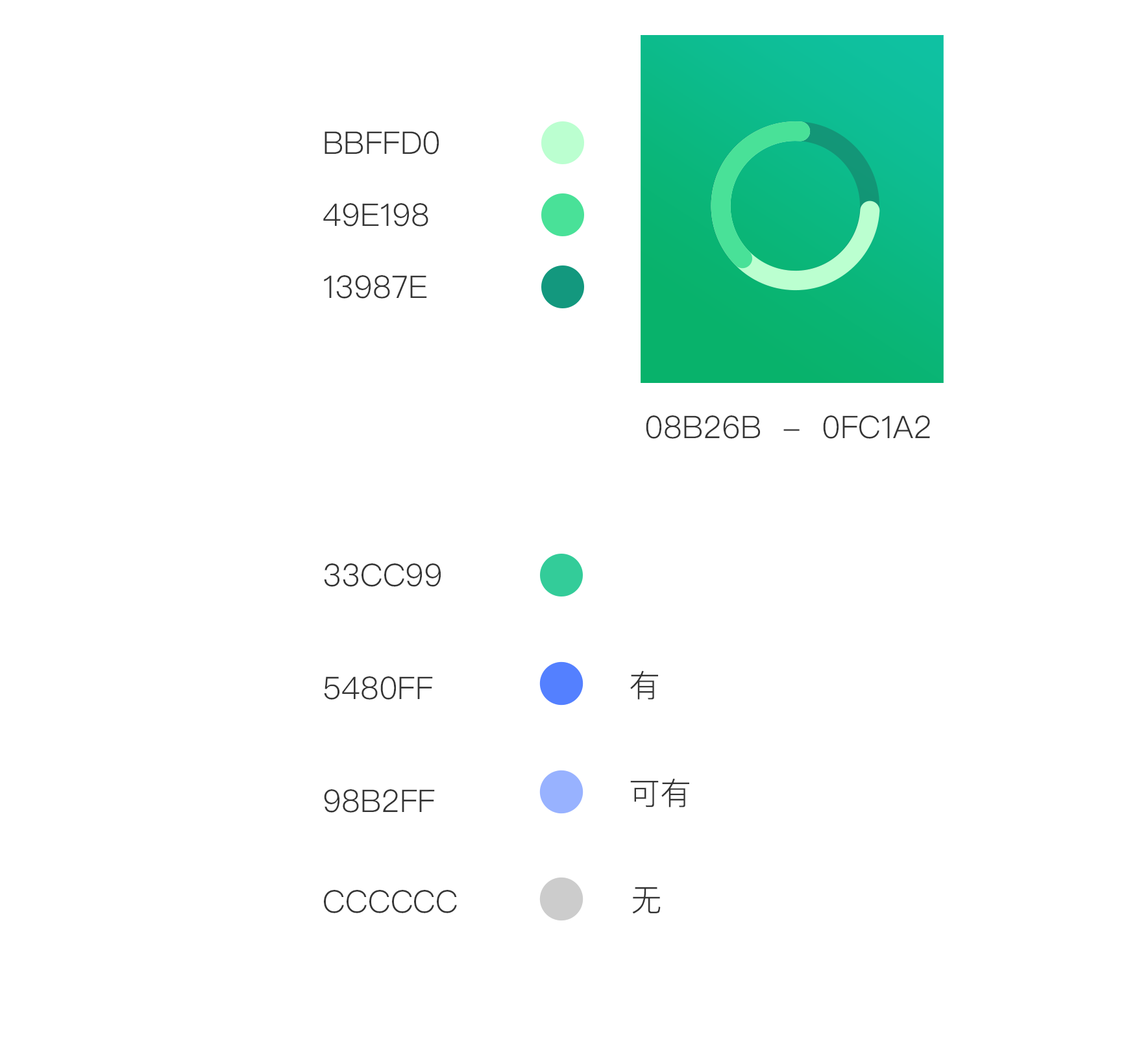
<style>
.page{position:relative;width:1128px;height:1058px;background:#ffffff}
.page>*{position:absolute;margin:0}
.t1{font:31.1px "PingFangSC-Light";color:#343434;text-transform:uppercase}
</style>
<div class="page">
<p class="t1" style="left:324px;top:131px;width:115px;height:23px">bbffd0</p>
<p class="t1" style="left:323px;top:203px;width:105px;height:23px">49e198</p>
<p class="t1" style="left:324px;top:275px;width:103px;height:23px">13987e</p>
<p class="t1" style="left:646px;top:415px;width:284px;height:24px">08b26b  -  0fc1a2</p>
<p class="t1" style="left:324px;top:563px;width:117px;height:23px">33cc99</p>
<p class="t1" style="left:324px;top:676px;width:109px;height:23px">5480ff</p>
<p class="t1" style="left:630px;top:670px;width:28px;height:29px">有</p>
<p class="t1" style="left:630px;top:778px;width:59px;height:29px">可有</p>
<p class="t1" style="left:324px;top:789px;width:111px;height:23px">98b2ff</p>
<p class="t1" style="left:324px;top:889px;width:133px;height:24px">cccccc</p>
<p class="t1" style="left:632px;top:886px;width:28px;height:27px">无</p>
</div>
